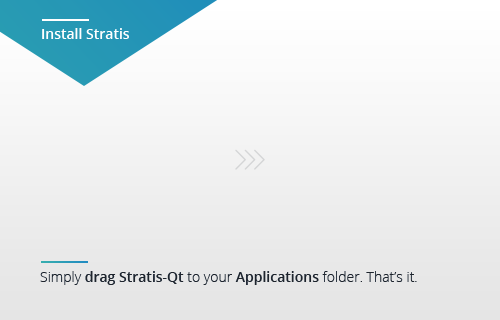
<style>
.page{position:relative;width:500px;height:320px}
.page>*{position:absolute;margin:0}
.t1{font:14px "OpenSans-Semibold";color:#ffffff}
.t2{font:14px "OpenSans-Light";color:#1e242c}
.t3{font:14px "OpenSans-Semibold";color:#1e242c}
</style>
<div class="page">
<p class="t1" style="left:42px;top:28px;width:87px;height:11px">Install Stratis</p>
<p class="t2" style="left:40px;top:271px;width:377px;height:14px">Simply <span class="t3">drag Stratis-Qt</span> to your <span class="t3">Applications</span> folder. That’s it.</p>
</div>
